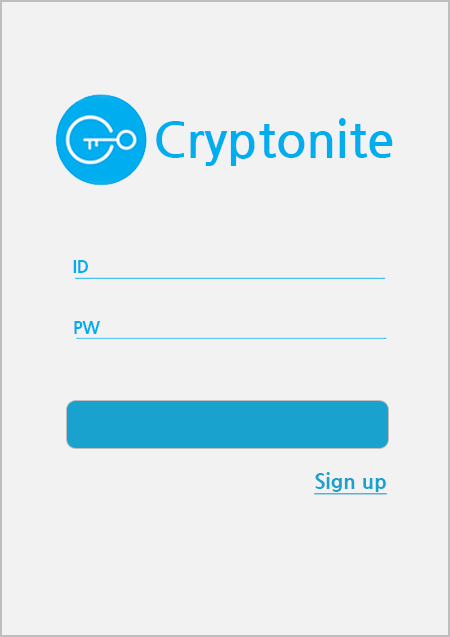
<style>
.page{position:relative;width:450px;height:637px;background:#f2f2f2}
.page>*{position:absolute;margin:0}
.t1{font:50px "NanumGothicBold";color:#00aeef}
.t2{font:16.7px "NanumGothicExtraBold";color:#00aeef}
.t3{font:20.8px "NanumGothicExtraBold";color:#19a2ce;text-decoration:underline}
</style>
<div class="page">
<p class="t1" style="left:156px;top:118px;width:237px;height:48px">Cryptonite</p>
<p class="t2" style="left:73px;top:260px;width:15px;height:13px">ID</p>
<p class="t2" style="left:74px;top:321px;width:26px;height:13px">PW</p>
<p class="t3" style="left:314px;top:472px;width:73px;height:23px">Sign up</p>
</div>
